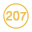
<style>
.page{position:relative;width:32px;height:32px;background:#ffffff}
.page>*{position:absolute;margin:0}
.t1{font:12px "HelveticaNeue";color:#edc051;font-weight:bold}
</style>
<div class="page">
<p class="t1" style="left:6px;top:11px;width:21px;height:10px">207</p>
</div>
